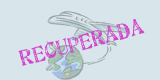
<style>
.page{position:relative;width:160px;height:80px;background:#d8e5eb}
.page>*{position:absolute;margin:0}
.t1{font:22px "ArtistampMedium";color:#d245cd}
</style>
<div class="page">
<p class="t1" style="left:18px;top:19px;width:127px;height:47px;rotate:-15deg">RECUPERADA</p>
</div>
